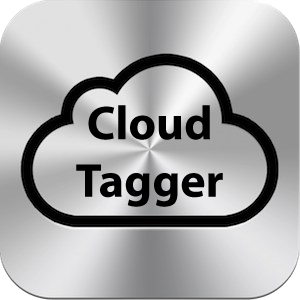
<style>
.page{position:relative;width:300px;height:300px}
.page>*{position:absolute;margin:0}
.t1{font:48px "MyriadPro-Bold";color:#000000}
</style>
<div class="page">
<p class="t1" style="left:76px;top:105px;width:147px;height:102px;text-align:center">Cloud<br>Tagger</p>
</div>
